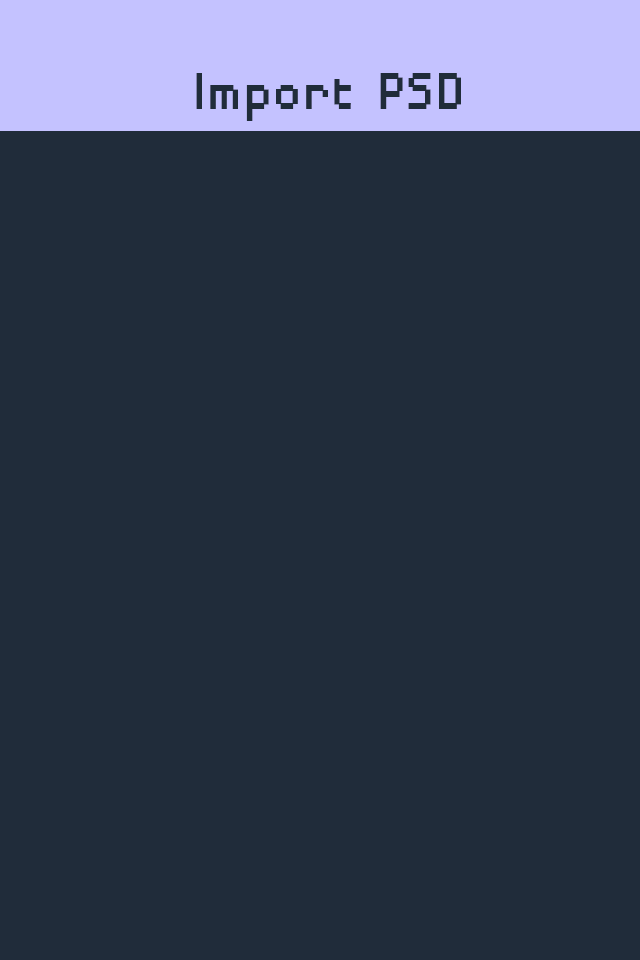
<style>
.page{position:relative;width:640px;height:960px;background:#202c3a}
.page>*{position:absolute;margin:0}
.t1{font:68.2px "DisposableDroidBB";color:#202c3a;scale:0.91 1}
</style>
<div class="page">
<p class="t1" style="left:196px;top:73px;width:265px;height:48px">Import PSD</p>
</div>
